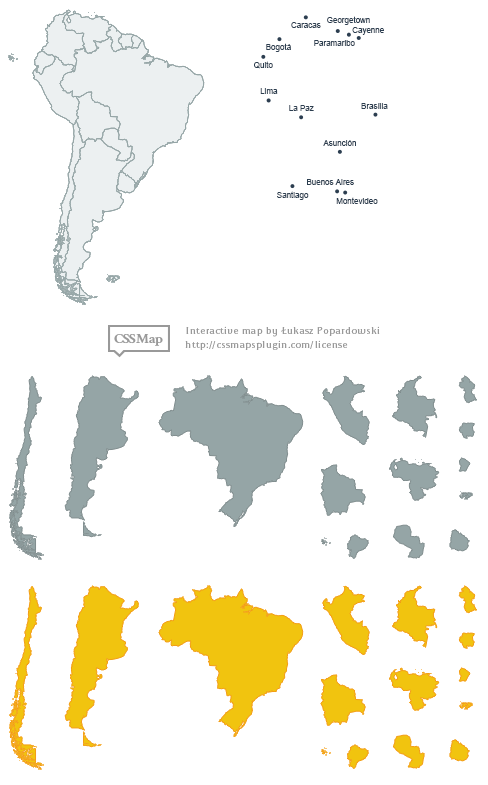
<style>
.page{position:relative;width:488px;height:785px;background:#ffffff}
.page>*{position:absolute;margin:0}
.t1{font:8px "ArialMT";color:#2c3e50}
</style>
<div class="page">
<p class="t1" style="left:327px;top:16px;width:43px;height:9px">Georgetown</p>
<p class="t1" style="left:291px;top:22px;width:30px;height:6px">Caracas</p>
<p class="t1" style="left:352px;top:27px;width:32px;height:8px">Cayenne</p>
<p class="t1" style="left:314px;top:40px;width:41px;height:6px">Paramaribo</p>
<p class="t1" style="left:266px;top:43px;width:25px;height:9px">Bogotá</p>
<p class="t1" style="left:254px;top:61px;width:19px;height:8px">Quito</p>
<p class="t1" style="left:260px;top:88px;width:18px;height:6px">Lima</p>
<p class="t1" style="left:289px;top:105px;width:25px;height:6px">La Paz</p>
<p class="t1" style="left:361px;top:103px;width:27px;height:6px">Brasília</p>
<p class="t1" style="left:323px;top:140px;width:33px;height:6px">Asunción</p>
<p class="t1" style="left:307px;top:179px;width:47px;height:6px">Buenos Aires</p>
<p class="t1" style="left:277px;top:191px;width:32px;height:9px">Santiago</p>
<p class="t1" style="left:336px;top:197px;width:42px;height:7px">Montevideo</p>
</div>
